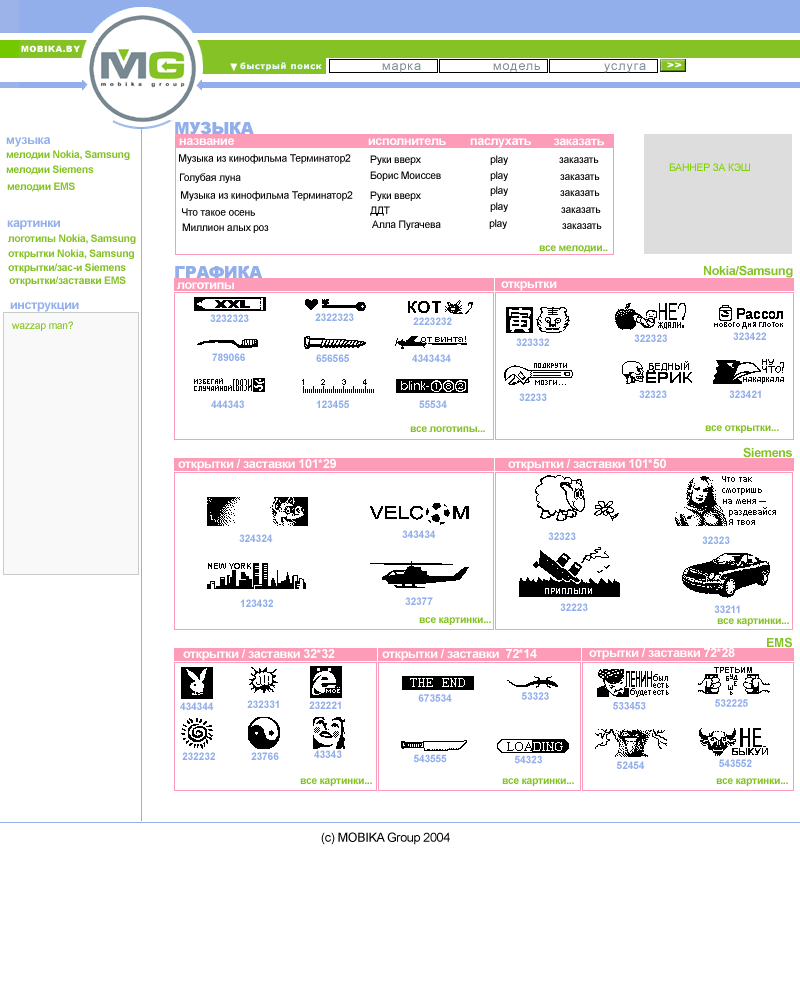
<style>
.page{position:relative;width:800px;height:1000px;background:#ffffff}
.page>*{position:absolute;margin:0}
.t1{font:8.3px "Arial-Black";letter-spacing:0.075em;color:#ffffff}
.t2{font:8.3px "Verdana-Bold";letter-spacing:0.075em;color:#ebf7fe}
.t3{font:12.5px "ArialMT";letter-spacing:0.075em;color:#788992}
.t4{font:8.5px "Arial-Black";letter-spacing:0.075em;color:#ffffff;scale:1.23 1}
.t5{font:16.7px "Arial-Black";letter-spacing:-0.025em;color:#92afec}
.t6{font:12.5px "Arial-BoldMT";letter-spacing:-0.025em;color:#92afec}
.t7{font:10.4px "Arial-BoldMT";letter-spacing:-0.025em;color:#85c226}
.t8{font:12.5px "Arial-BoldMT";letter-spacing:-0.025em;color:#ffffff}
.t9{font:10.4px "ArialMT";letter-spacing:-0.025em;color:#000000}
.t10{font:10.4px "ArialMT";letter-spacing:-0.025em;color:#81d103}
.t11{font:12.5px "Arial-BoldMT";letter-spacing:-0.025em;color:#85c226}
.t12{font:10.4px "Arial-BoldMT";letter-spacing:-0.025em;color:#92afec}
.t13{font:10.4px "ArialMT";letter-spacing:-0.025em;color:#85c226}
.t14{font:12.5px "ArialMT";letter-spacing:-0.025em;color:#000000}
</style>
<div class="page">
<p class="t1" style="left:21px;top:45px;width:59px;height:7px">MOBIKA.BY</p>
<p class="t2" style="left:240px;top:62px;width:82px;height:9px">быстрый поиск</p>
<p class="t3" style="left:493px;top:63px;width:47px;height:9px">модель</p>
<p class="t4" style="left:667px;top:62px;width:15px;height:6px">&gt;&gt;</p>
<p class="t5" style="left:175px;top:121px;width:79px;height:14px">МУЗЫКА</p>
<p class="t6" style="left:6px;top:137px;width:45px;height:10px">музыка</p>
<p class="t7" style="left:6px;top:150px;width:124px;height:10px">мелодии Nokia, Samsung</p>
<p class="t8" style="left:179px;top:138px;width:55px;height:7px">название</p>
<p class="t8" style="left:368px;top:138px;width:78px;height:7px">исполнитель</p>
<p class="t8" style="left:470px;top:138px;width:61px;height:10px">паслухать</p>
<p class="t8" style="left:553px;top:138px;width:51px;height:8px">заказать</p>
<p class="t9" style="left:179px;top:154px;width:172px;height:10px">Музыка из кинофильма Терминатор2</p>
<p class="t9" style="left:370px;top:155px;width:51px;height:10px">Руки вверх</p>
<p class="t7" style="left:6px;top:165px;width:88px;height:10px">мелодии Siemens</p>
<p class="t9" style="left:180px;top:173px;width:61px;height:10px">Голубая луна</p>
<p class="t9" style="left:370px;top:171px;width:71px;height:10px">Борис Моиссев</p>
<p class="t10" style="left:669px;top:163px;width:81px;height:8px">БАННЕР ЗА КЭШ</p>
<p class="t7" style="left:7px;top:182px;width:68px;height:10px">мелодии EMS</p>
<p class="t9" style="left:181px;top:191px;width:172px;height:10px">Музыка из кинофильма Терминатор2</p>
<p class="t9" style="left:370px;top:191px;width:51px;height:10px">Руки вверх</p>
<p class="t9" style="left:182px;top:208px;width:73px;height:8px">Что такое осень</p>
<p class="t9" style="left:370px;top:206px;width:20px;height:10px">ДДТ</p>
<p class="t6" style="left:7px;top:220px;width:53px;height:10px">картинки</p>
<p class="t9" style="left:372px;top:220px;width:69px;height:10px">Алла Пугачева</p>
<p class="t9" style="left:489px;top:219px;width:18px;height:10px">play</p>
<p class="t9" style="left:182px;top:223px;width:87px;height:10px">Миллион алых роз</p>
<p class="t9" style="left:562px;top:223px;width:40px;height:6px">заказать</p>
<p class="t7" style="left:8px;top:234px;width:128px;height:10px">логотипы Nokia, Samsung</p>
<p class="t7" style="left:539px;top:245px;width:69px;height:8px">все мелодии..</p>
<p class="t7" style="left:8px;top:249px;width:126px;height:10px">открытки Nokia, Samsung</p>
<p class="t7" style="left:8px;top:263px;width:118px;height:10px">открытки/зас-и Siemens</p>
<p class="t5" style="left:175px;top:265px;width:88px;height:13px">ГРАФИКА</p>
<p class="t11" style="left:704px;top:265px;width:89px;height:13px">Nokia/Samsung</p>
<p class="t7" style="left:9px;top:276px;width:117px;height:10px">открытки/заставки EMS</p>
<p class="t8" style="left:501px;top:281px;width:56px;height:10px">открытки</p>
<p class="t8" style="left:177px;top:282px;width:57px;height:7px">логотипы</p>
<p class="t6" style="left:10px;top:302px;width:69px;height:10px">инструкции</p>
<p class="t12" style="left:210px;top:314px;width:39px;height:8px">3232323</p>
<p class="t12" style="left:315px;top:313px;width:39px;height:8px">2322323</p>
<p class="t12" style="left:413px;top:317px;width:39px;height:8px">2223232</p>
<p class="t13" style="left:12px;top:321px;width:61px;height:10px">wazzap man?</p>
<p class="t12" style="left:516px;top:338px;width:33px;height:8px">323332</p>
<p class="t12" style="left:634px;top:334px;width:33px;height:8px">322323</p>
<p class="t12" style="left:733px;top:332px;width:33px;height:8px">323422</p>
<p class="t12" style="left:212px;top:353px;width:33px;height:8px">789066</p>
<p class="t12" style="left:316px;top:354px;width:33px;height:8px">656565</p>
<p class="t12" style="left:412px;top:354px;width:39px;height:8px">4343434</p>
<p class="t12" style="left:639px;top:390px;width:28px;height:8px">32323</p>
<p class="t12" style="left:729px;top:390px;width:32px;height:8px">323421</p>
<p class="t12" style="left:211px;top:400px;width:33px;height:8px">444343</p>
<p class="t12" style="left:316px;top:400px;width:33px;height:8px">123455</p>
<p class="t12" style="left:419px;top:400px;width:28px;height:8px">55534</p>
<p class="t12" style="left:519px;top:393px;width:28px;height:8px">32233</p>
<p class="t7" style="left:705px;top:425px;width:74px;height:8px">все открытки...</p>
<p class="t7" style="left:410px;top:426px;width:75px;height:6px">все логотипы...</p>
<p class="t11" style="left:743px;top:447px;width:49px;height:11px">Siemens</p>
<p class="t8" style="left:178px;top:459px;width:158px;height:12px">открытки / заставки 101*29</p>
<p class="t8" style="left:508px;top:459px;width:158px;height:12px">открытки / заставки 101*50</p>
<p class="t12" style="left:239px;top:534px;width:34px;height:8px">324324</p>
<p class="t12" style="left:402px;top:530px;width:34px;height:8px">343434</p>
<p class="t12" style="left:548px;top:532px;width:28px;height:8px">32323</p>
<p class="t12" style="left:702px;top:536px;width:28px;height:8px">32323</p>
<p class="t12" style="left:240px;top:599px;width:33px;height:8px">123432</p>
<p class="t12" style="left:405px;top:597px;width:28px;height:8px">32377</p>
<p class="t12" style="left:560px;top:603px;width:28px;height:8px">32223</p>
<p class="t12" style="left:714px;top:605px;width:26px;height:8px">33211</p>
<p class="t7" style="left:419px;top:617px;width:72px;height:8px">все картинки...</p>
<p class="t7" style="left:717px;top:618px;width:72px;height:8px">все картинки...</p>
<p class="t11" style="left:767px;top:637px;width:25px;height:11px">EMS</p>
<p class="t8" style="left:183px;top:649px;width:152px;height:12px">открытки / заставки 32*32</p>
<p class="t8" style="left:382px;top:649px;width:155px;height:12px">открытки / заставки  72*14</p>
<p class="t8" style="left:589px;top:648px;width:146px;height:12px">отрытки / заставки 72*28</p>
<p class="t12" style="left:180px;top:702px;width:34px;height:8px">434344</p>
<p class="t12" style="left:247px;top:700px;width:32px;height:8px">232331</p>
<p class="t12" style="left:309px;top:701px;width:32px;height:8px">232221</p>
<p class="t12" style="left:418px;top:694px;width:34px;height:8px">673534</p>
<p class="t12" style="left:521px;top:692px;width:28px;height:8px">53323</p>
<p class="t12" style="left:613px;top:702px;width:33px;height:8px">533453</p>
<p class="t12" style="left:715px;top:699px;width:33px;height:8px">532225</p>
<p class="t12" style="left:314px;top:750px;width:28px;height:8px">43343</p>
<p class="t12" style="left:182px;top:752px;width:33px;height:8px">232232</p>
<p class="t12" style="left:251px;top:752px;width:28px;height:8px">23766</p>
<p class="t12" style="left:413px;top:754px;width:34px;height:9px">543555</p>
<p class="t12" style="left:514px;top:755px;width:28px;height:9px">54323</p>
<p class="t12" style="left:616px;top:761px;width:29px;height:8px">52454</p>
<p class="t12" style="left:719px;top:759px;width:33px;height:8px">543552</p>
<p class="t7" style="left:300px;top:778px;width:72px;height:8px">все картинки...</p>
<p class="t7" style="left:502px;top:778px;width:72px;height:8px">все картинки...</p>
<p class="t7" style="left:716px;top:778px;width:72px;height:8px">все картинки...</p>
<p class="t14" style="left:321px;top:832px;width:129px;height:13px">(с) MOBIKA Group 2004</p>
</div>
